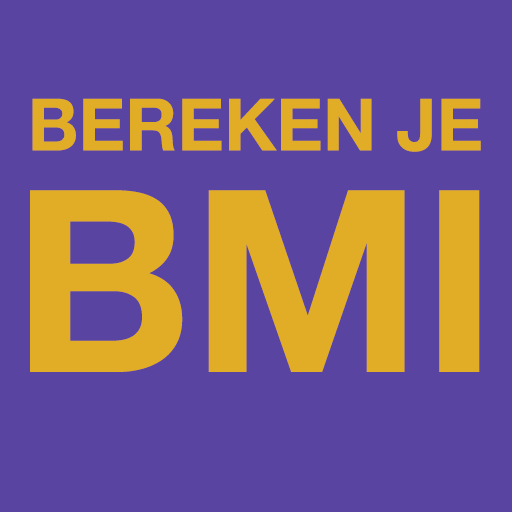
<style>
.page{position:relative;width:512px;height:512px;background:#5a44a2}
.page>*{position:absolute;margin:0}
.t1{font:72.2px "HelveticaNeueLTCom-Bd";color:#e1ad27}
.t2{font:254.3px "HelveticaNeueLTCom-Bd";color:#e1ad27}
</style>
<div class="page">
<p class="t1" style="left:32px;top:98px;width:449px;height:54px">BEREKEN JE</p>
<p class="t2" style="left:30px;top:190px;width:450px;height:182px">BMI</p>
</div>
